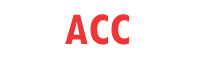
<style>
.page{position:relative;width:198px;height:71px;background:#ffffff}
.page>*{position:absolute;margin:0}
.t1{font:48px "TwCenMT-CondensedBold";color:#ef3535}
</style>
<div class="page">
<p class="t1" style="left:65px;top:14px;width:64px;height:31px">ACC</p>
</div>
